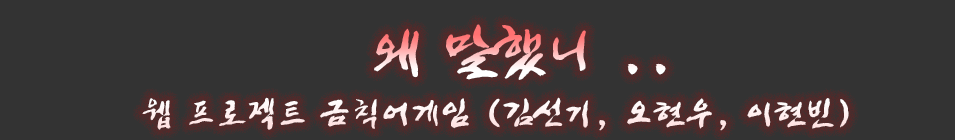
<style>
.page{position:relative;width:955px;height:140px;background:#333333}
.page>*{position:absolute;margin:0}
.t1{font:60px "JShinYeongBok-Regular"}
.t2{font:36px "JShinYeongBok-Regular";color:#ffe8e8}
</style>
<div class="page">
<p class="t1" style="left:374px;top:24px;width:292px;height:56px">왜 말했니 ..</p>
<p class="t2" style="left:142px;top:97px;width:707px;height:34px">웹 프로젝트 금칙어게임 (김선기, 오현우, 이현빈)</p>
</div>
